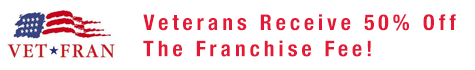
<style>
.page{position:relative;width:475px;height:70px;background:#ffffff}
.page>*{position:absolute;margin:0}
.t1{font:21.8px "HelveticaNeue-CondensedBold";letter-spacing:0.18em;color:#e51937}
</style>
<div class="page">
<p class="t1" style="left:143px;top:14px;width:313px;height:43px">Veterans Receive 50% Off <br>The Franchise Fee!</p>
</div>
